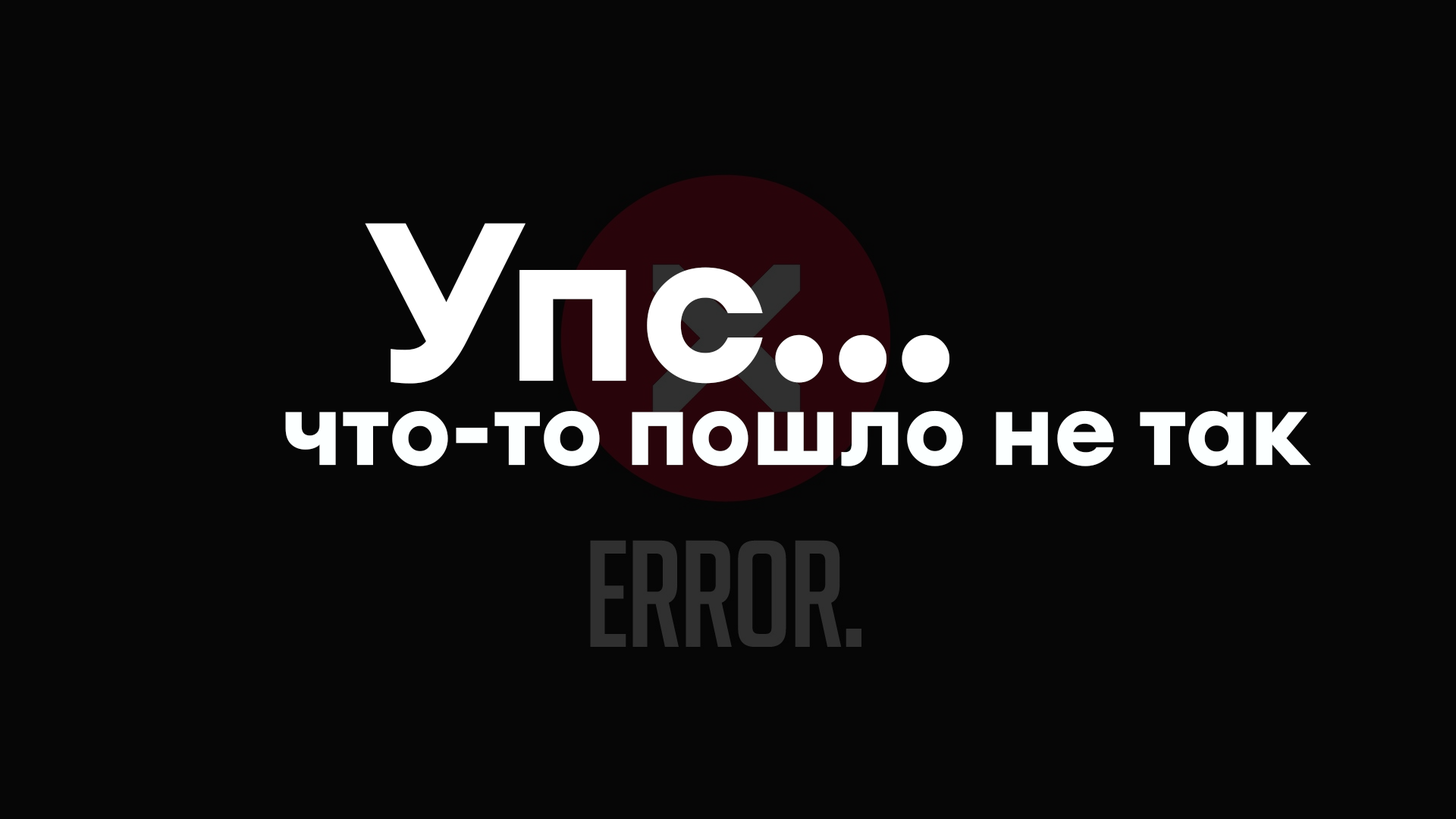
<style>
.page{position:relative;width:1456px;height:819px;background:#060606}
.page>*{position:absolute;margin:0}
.t1{font:221.2px "EuclidCircularA-Bold";color:#ffffff}
.t2{font:105.1px "EuclidCircularA-Bold";color:#fcffff}
</style>
<div class="page">
<p class="t1" style="left:365px;top:223px;width:584px;height:161px">Упс...</p>
<p class="t2" style="left:285px;top:410px;width:1026px;height:56px">что-то пошло не так</p>
</div>
